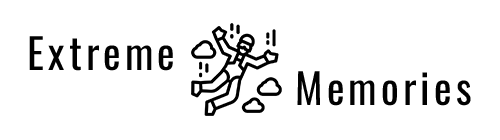
<style>
.page{position:relative;width:500px;height:140px;background:#ffffff}
.page>*{position:absolute;margin:0}
.t1{font:41.7px "Oswald-Regular";letter-spacing:0.1em;color:#010101}
</style>
<div class="page">
<p class="t1" style="left:29px;top:36px;width:144px;height:35px">Extreme</p>
<p class="t1" style="left:297px;top:71px;width:174px;height:35px">Memories</p>
</div>
